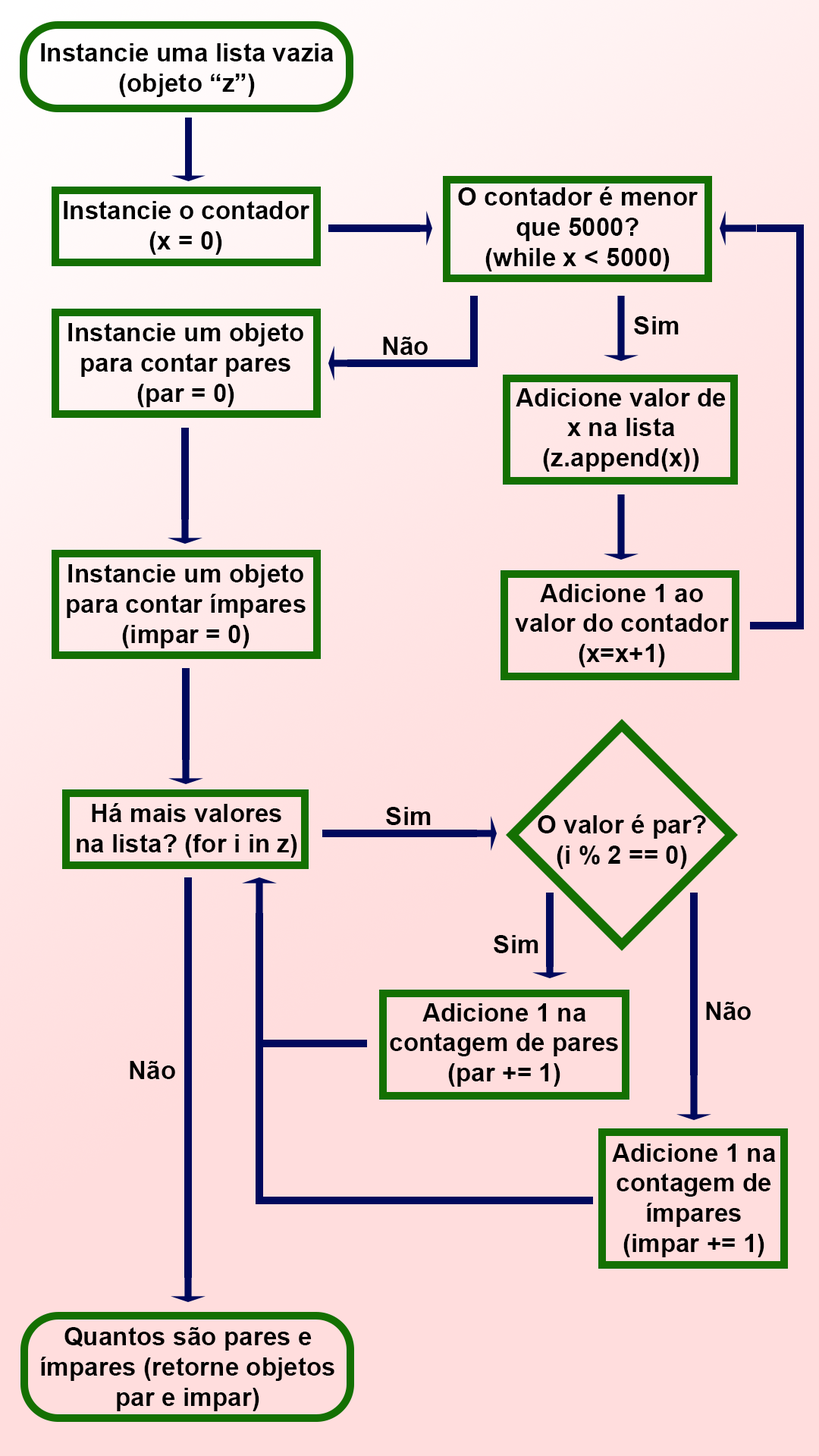
<style>
.page{position:relative;width:819px;height:1456px;background:#ffdddd}
.page>*{position:absolute;margin:0}
.t1{font:25.3px "Arial-BoldMT";color:#000000}
</style>
<div class="page">
<p class="t1" style="left:41px;top:43px;width:293px;height:54px;text-align:center">Instancie uma lista vazia<br>(objeto “z”)</p>
<p class="t1" style="left:458px;top:187px;width:240px;height:84px;text-align:center">O contador é menor<br>que 5000?<br>(while x &lt; 5000)</p>
<p class="t1" style="left:64px;top:201px;width:245px;height:54px;text-align:center">Instancie o contador<br>(x = 0)</p>
<p class="t1" style="left:634px;top:316px;width:45px;height:18px">Sim</p>
<p class="t1" style="left:68px;top:323px;width:235px;height:84px;text-align:center">Instancie um objeto<br>para contar pares<br>(par = 0)</p>
<p class="t1" style="left:383px;top:337px;width:45px;height:18px">Não</p>
<p class="t1" style="left:516px;top:388px;width:210px;height:84px;text-align:center">Adicione valor de<br>x na lista<br>(z.append(x))</p>
<p class="t1" style="left:67px;top:564px;width:239px;height:84px;text-align:center">Instancie um objeto<br>para contar ímpares<br>(impar = 0)</p>
<p class="t1" style="left:515px;top:584px;width:214px;height:83px;text-align:center">Adicione 1 ao<br>valor do contador<br>(x=x+1)</p>
<p class="t1" style="left:77px;top:803px;width:220px;height:55px;text-align:center">Há mais valores<br>na lista? (for i in z)</p>
<p class="t1" style="left:386px;top:807px;width:45px;height:18px">Sim</p>
<p class="t1" style="left:538px;top:814px;width:168px;height:55px;text-align:center">O valor é par?<br>(i % 2 == 0)</p>
<p class="t1" style="left:494px;top:935px;width:44px;height:18px">Sim</p>
<p class="t1" style="left:706px;top:1002px;width:45px;height:18px">Não</p>
<p class="t1" style="left:390px;top:1003px;width:228px;height:84px;text-align:center">Adicione 1 na<br>contagem de pares<br>(par += 1)</p>
<p class="t1" style="left:130px;top:1061px;width:45px;height:18px">Não</p>
<p class="t1" style="left:612px;top:1144px;width:164px;height:113px;text-align:center">Adicione 1 na<br>contagem de<br>ímpares<br>(impar += 1)</p>
<p class="t1" style="left:40px;top:1327px;width:294px;height:84px;text-align:center">Quantos são pares e<br>ímpares (retorne objetos<br>par e impar)</p>
</div>
